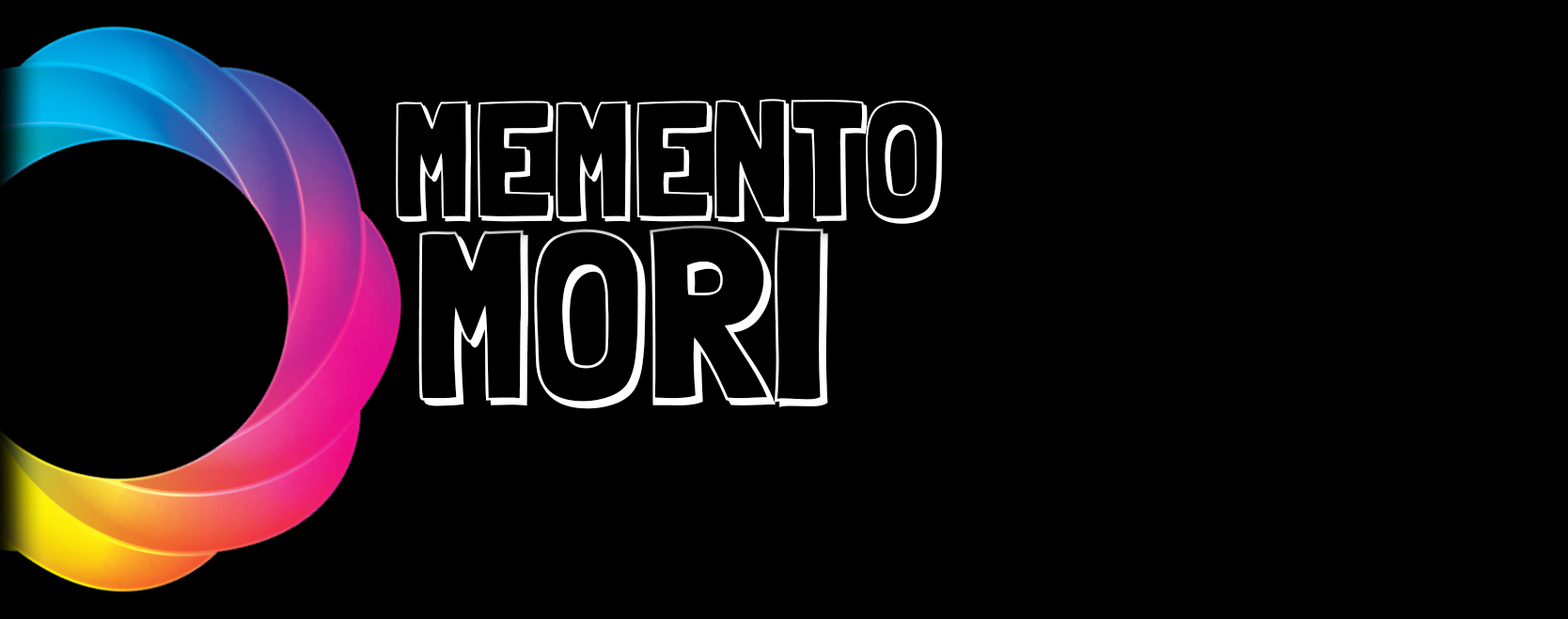
<style>
.page{position:relative;width:1568px;height:619px;background:#000000}
.page>*{position:absolute;margin:0}
.t1{font:162.3px "LondrinaShadow-Regular";color:#fefefe;text-transform:uppercase}
.t2{font:237px "LondrinaShadow-Regular";color:#fefefe;text-transform:uppercase}
</style>
<div class="page">
<p class="t1" style="left:396px;top:99px;width:547px;height:125px">Memento</p>
<p class="t2" style="left:418px;top:225px;width:410px;height:184px">Mori</p>
</div>
